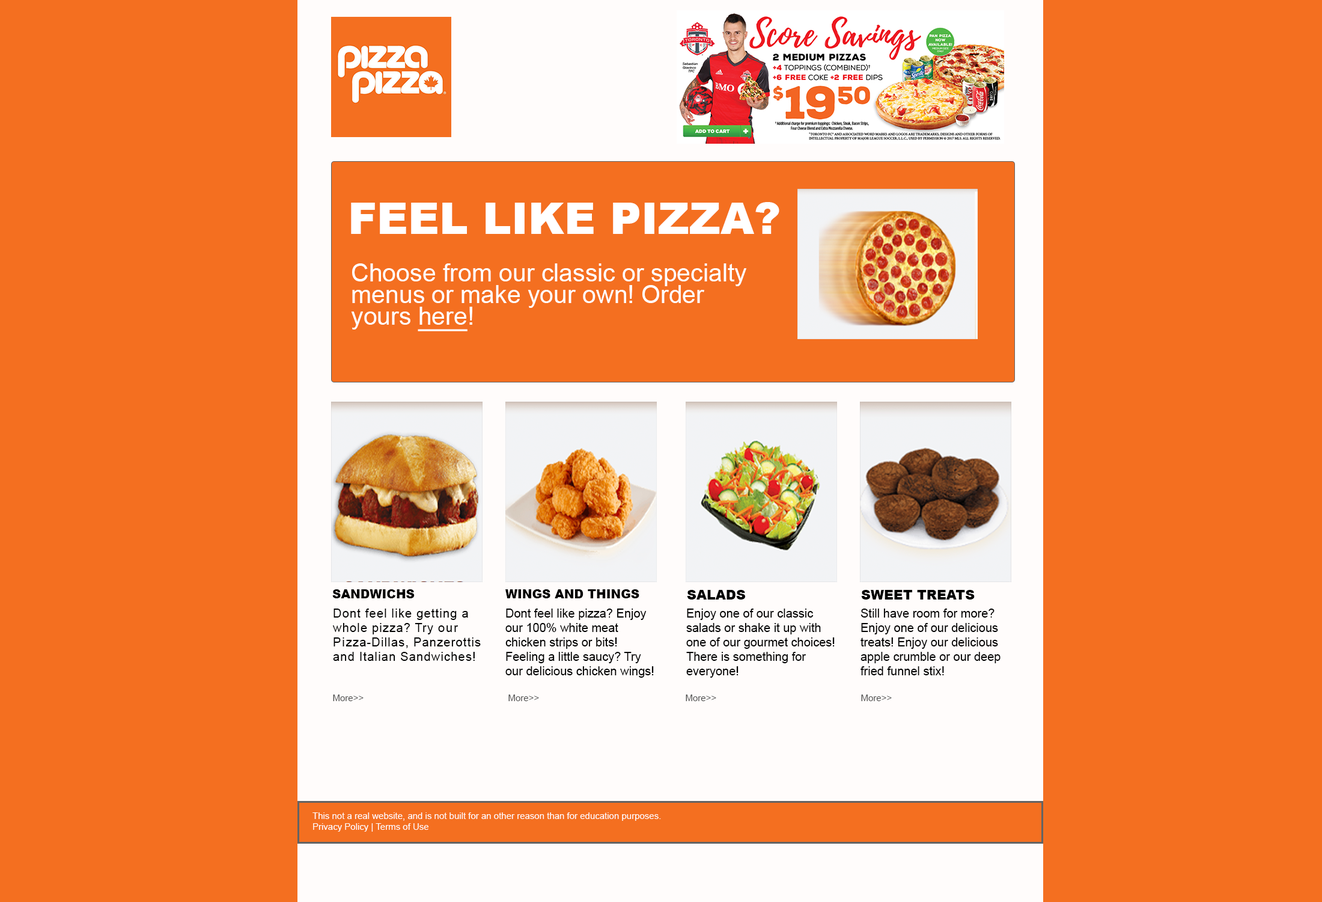
<style>
.page{position:relative;width:1322px;height:902px;background:#f46f20}
.page>*{position:absolute;margin:0}
.t1{font:43.3px "Arial-Black";color:#ffffff}
.t2{font:24.6px/21.6px "ArialMT";color:#ffffff}
.t3{font:24.6px/21.6px "ArialMT";color:#ffffff;text-decoration:underline}
.t4{font:12px "Arial-Black";color:#000000}
.t5{font:13.2px "Arial-Black";color:#000000}
.t6{font:12px "ArialMT";letter-spacing:0.06em;color:#000000}
.t7{font:12px "ArialMT";letter-spacing:0.1em;color:#000000}
.t8{font:12px "ArialMT";color:#000000}
.t9{font:9px "ArialMT";color:#4e4e4e}
.t10{font:9px "ArialMT";color:#ffffff}
</style>
<div class="page">
<p class="t1" style="left:351px;top:202px;width:429px;height:32px">FEEL LIKE PIZZA?</p>
<p class="t2" style="left:351px;top:263px;width:396px;height:68px">Choose from our classic or specialty menus or make your own! Order yours <span class="t3">here</span>!</p>
<p class="t4" style="left:332px;top:589px;width:83px;height:9px">SANDWICHS</p>
<p class="t4" style="left:506px;top:589px;width:134px;height:9px">WINGS AND THINGS</p>
<p class="t5" style="left:687px;top:590px;width:58px;height:9px">SALADS</p>
<p class="t5" style="left:861px;top:590px;width:114px;height:9px">SWEET TREATS</p>
<p class="t6" style="left:333px;top:608px;width:148px;height:53px">Dont feel like getting a whole pizza? Try <span class="t7">our Pi</span>zza-Dillas, Panzerottis and Italian Sandwiches!</p>
<p class="t8" style="left:506px;top:608px;width:148px;height:69px">Dont feel like pizza? Enjoy our 100% white meat chicken strips or bits! Feeling a little saucy? Try our delicious chicken wings!</p>
<p class="t8" style="left:686px;top:608px;width:149px;height:69px">Enjoy one of our classic salads or shake it up with one of our gourmet choices! There is something for everyone!</p>
<p class="t8" style="left:861px;top:608px;width:140px;height:67px">Still have room for more? Enjoy one of our delicious treats! Enjoy our delicious apple crumble or our deep fried funnel stix!</p>
<p class="t9" style="left:333px;top:694px;width:31px;height:7px">More&gt;&gt;</p>
<p class="t9" style="left:509px;top:694px;width:30px;height:7px">More&gt;&gt;</p>
<p class="t9" style="left:686px;top:694px;width:31px;height:7px">More&gt;&gt;</p>
<p class="t9" style="left:861px;top:694px;width:31px;height:7px">More&gt;&gt;</p>
<p class="t10" style="left:313px;top:812px;width:348px;height:19px">This not a real website, and is not built for an other reason than for education purposes. <br>Privacy Policy | Terms of Use</p>
</div>
